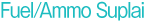
<style>
.page{position:relative;width:153px;height:21px;background:#ffffff}
.page>*{position:absolute;margin:0}
.t1{font:20px "GothicMB101Pro-Regular";letter-spacing:-0.06em;color:#1dbcc0;scale:0.9 1}
</style>
<div class="page">
<p class="t1" style="left:1px;top:1px;width:143px;height:20px">Fuel/Ammo Suplai</p>
</div>
